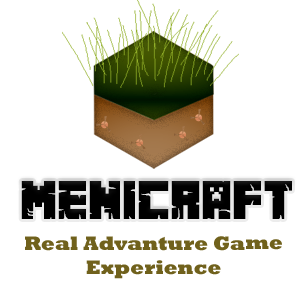
<style>
.page{position:relative;width:300px;height:300px;background:#ffffff}
.page>*{position:absolute;margin:0}
.t1{font:48.4px "MinecrafterAlt";color:#000000;scale:0.95 1}
.t2{font:20px "Rockwell-ExtraBold";color:#70611c}
</style>
<div class="page">
<p class="t1" style="left:21px;top:181px;width:271px;height:38px">Menicraft</p>
<p class="t2" style="left:25px;top:236px;width:257px;height:43px;text-align:center">Real Advanture Game <br>Experience</p>
</div>
